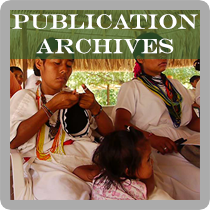
<style>
.page{position:relative;width:210px;height:210px}
.page>*{position:absolute;margin:0}
.t1{font:20.4px "EngraversMT";color:#ffffff}
</style>
<div class="page">
<p class="t1" style="left:12px;top:14px;width:186px;height:40px;text-align:center">PUblication<br>Archives</p>
</div>
